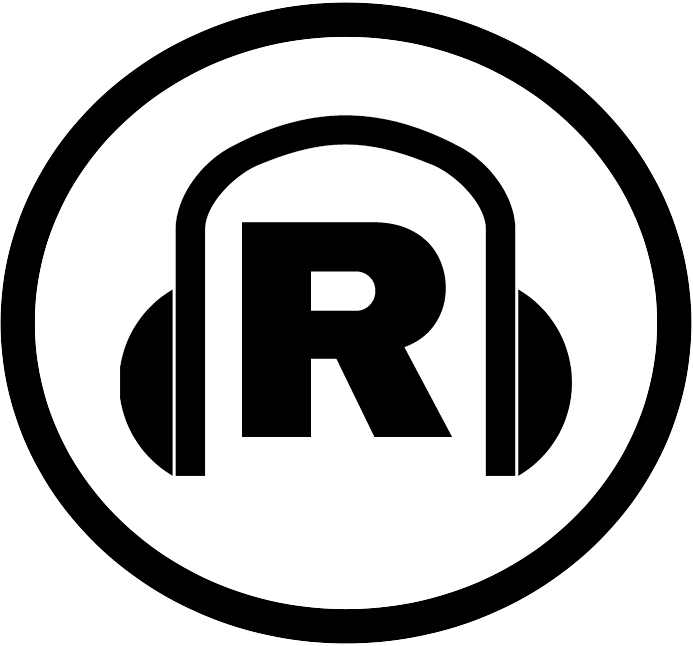
<style>
.page{position:relative;width:693px;height:646px;background:#ffffff}
.page>*{position:absolute;margin:0}
.t1{font:311.7px "ArchivoBlack-Regular";letter-spacing:0.06em;color:#000000}
</style>
<div class="page">
<p class="t1" style="left:242px;top:222px;width:210px;height:215px">R</p>
</div>
